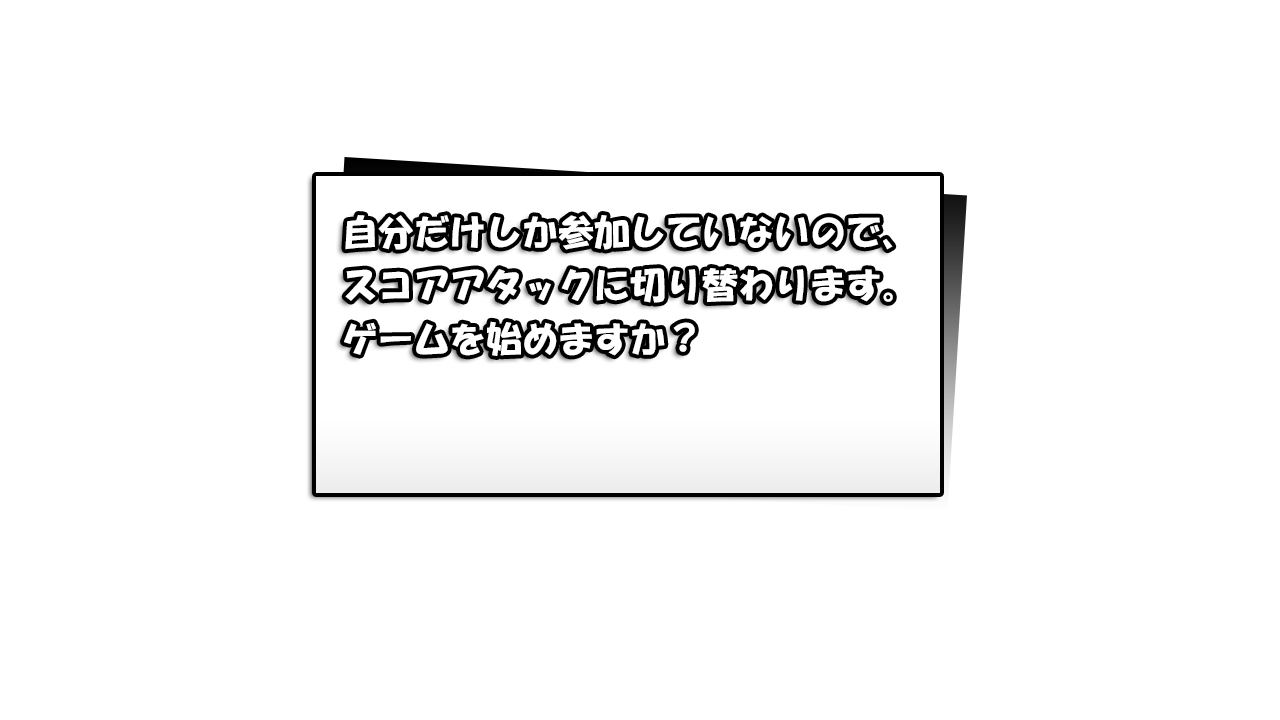
<style>
.page{position:relative;width:1280px;height:720px;background:#ffffff}
.page>*{position:absolute;margin:0}
.t1{font:36px "HGSSoeiKakupoptai";color:#ffffff}
</style>
<div class="page">
<p class="t1" style="left:344px;top:215px;width:549px;height:141px">自分だけしか参加していないので、<br>スコアアタックに切り替わります。<br>ゲームを始めますか？</p>
</div>
